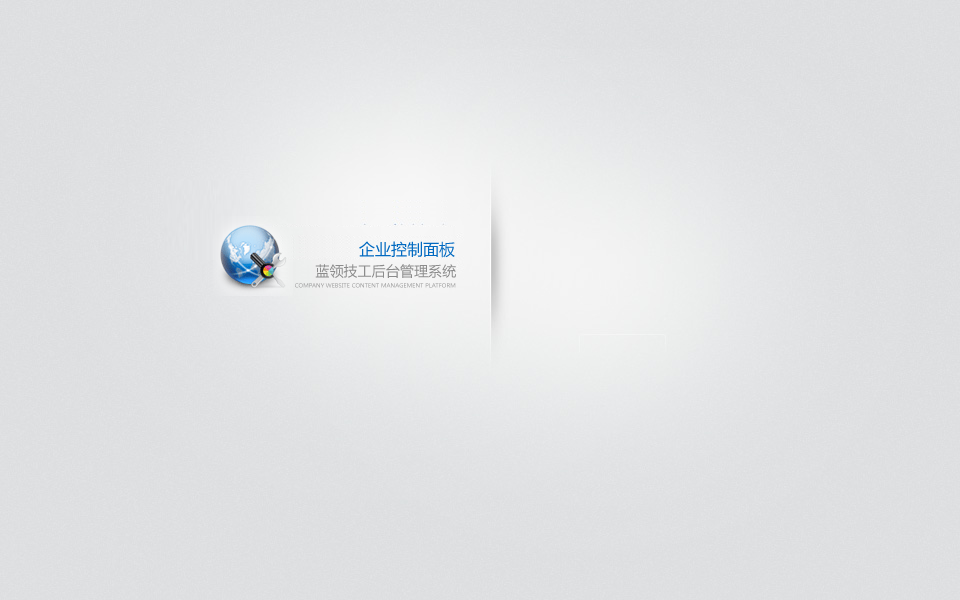
<style>
.page{position:relative;width:960px;height:600px}
.page>*{position:absolute;margin:0}
.t1{font:16px "MicrosoftYaHei";color:#026ac1}
.t2{font:14.1px "MicrosoftYaHei";color:#8c8c8c}
.t3{font:5.8px "MicrosoftYaHei";color:#9a9a9a;text-transform:uppercase}
</style>
<div class="page">
<p class="t1" style="left:359px;top:241px;width:96px;height:17px">企业控制面板</p>
<p class="t2" style="left:315px;top:264px;width:141px;height:14px">蓝领技工后台管理系统</p>
<p class="t3" style="left:295px;top:283px;width:161px;height:5px">Company WebSite Content Management Platform</p>
</div>
